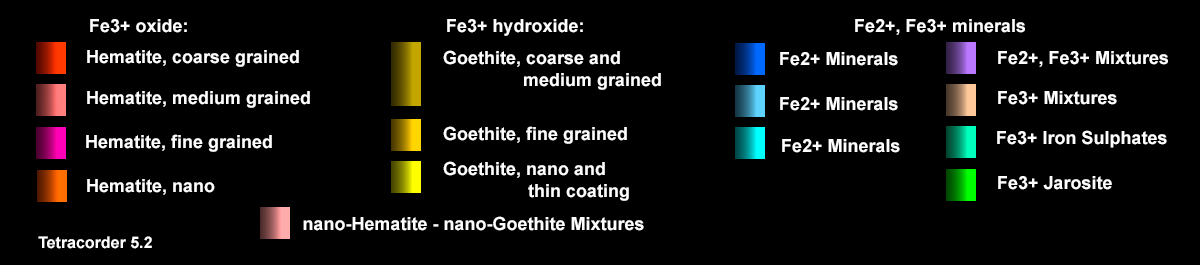
<style>
.page{position:relative;width:1200px;height:265px;background:#000000}
.page>*{position:absolute;margin:0}
.t1{font:18px "Arial-BoldMT";color:#fffefe}
.t2{font:16px "Arial-BoldMT";color:#fffefe}
</style>
<div class="page">
<p class="t1" style="left:90px;top:19px;width:97px;height:14px">Fe3+ oxide:</p>
<p class="t1" style="left:447px;top:19px;width:136px;height:17px">Fe3+ hydroxide:</p>
<p class="t1" style="left:855px;top:19px;width:170px;height:16px">Fe2+, Fe3+ minerals</p>
<p class="t1" style="left:87px;top:50px;width:212px;height:17px">Hematite, coarse grained</p>
<p class="t1" style="left:443px;top:50px;width:218px;height:40px">Goethite, coarse and<br>                medium grained</p>
<p class="t1" style="left:780px;top:52px;width:118px;height:14px">Fe2+ Minerals</p>
<p class="t1" style="left:998px;top:51px;width:170px;height:16px">Fe2+, Fe3+ Mixtures</p>
<p class="t1" style="left:87px;top:91px;width:223px;height:17px">Hematite, medium grained</p>
<p class="t1" style="left:780px;top:97px;width:118px;height:14px">Fe2+ Minerals</p>
<p class="t1" style="left:998px;top:91px;width:119px;height:14px">Fe3+ Mixtures</p>
<p class="t1" style="left:443px;top:126px;width:184px;height:18px">Goethite, fine grained</p>
<p class="t1" style="left:86px;top:134px;width:186px;height:18px">Hematite, fine grained</p>
<p class="t1" style="left:997px;top:130px;width:170px;height:18px">Fe3+ Iron Sulphates</p>
<p class="t1" style="left:782px;top:139px;width:118px;height:14px">Fe2+ Minerals</p>
<p class="t1" style="left:443px;top:161px;width:186px;height:40px">Goethite, nano and<br>                 thin coating</p>
<p class="t1" style="left:87px;top:179px;width:128px;height:16px">Hematite, nano</p>
<p class="t1" style="left:998px;top:176px;width:114px;height:14px">Fe3+ Jarosite</p>
<p class="t1" style="left:303px;top:216px;width:341px;height:15px">nano-Hematite - nano-Goethite Mixtures</p>
<p class="t2" style="left:38px;top:236px;width:114px;height:13px">Tetracorder 5.2</p>
</div>
